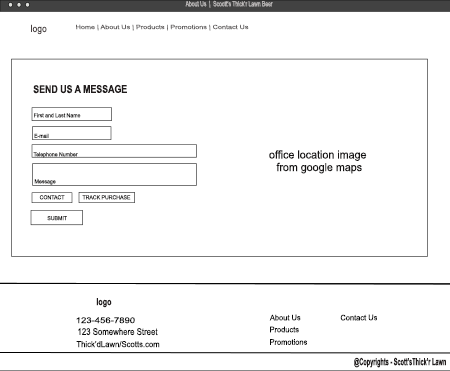
<style>
.page{position:relative;width:450px;height:371px;background:#ffffff}
.page>*{position:absolute;margin:0}
.t1{font:7.4px "ArialNarrow";color:#c2bfbf;scale:0.83 1}
.t2{font:9.8px "ArialNarrow";color:#484040;scale:1.07 1}
.t3{font:5.8px "ArialNarrow";color:#615e5e;scale:1.52 1}
.t4{font:10.8px "ArialNarrow-Bold";color:#211c1c}
.t5{font:5.6px "ArialNarrow";color:#151313;scale:1.13 1}
.t6{font:11.2px/12.5px "ArialNarrow";color:#151313;scale:1.16 1}
.t7{font:5.6px "ArialNarrow";scale:1.13 1}
.t8{font:5.6px "ArialNarrow";color:#313030;scale:1.13 1}
.t9{font:9.7px "ArialNarrow-Bold";color:#211c1c;scale:0.91 1}
.t10{font:8.1px "ArialNarrow";color:#080808;scale:1.44 1}
.t11{font:7.7px "ArialNarrow";color:#080808;scale:1.18 1}
.t12{font:9.3px "ArialNarrow";color:#080808}
.t13{font:8.3px "ArialNarrow";color:#080808;scale:1.14 1}
.t14{font:10px "ArialNarrow-Bold";color:#211c1c;scale:0.68 1}
</style>
<div class="page">
<p class="t1" style="left:185px;top:0px;width:88px;height:8px">About Us  |  Scoott’s Thick’r Lawn Beer</p>
<p class="t2" style="left:31px;top:24px;width:16px;height:11px">logo</p>
<p class="t3" style="left:76px;top:24px;width:173px;height:7px">Home | About Us | Products | Promotions | Contact Us</p>
<p class="t4" style="left:33px;top:84px;width:94px;height:10px">SEND US A MESSAGE</p>
<p class="t5" style="left:34px;top:113px;width:47px;height:5px">First and Last Name</p>
<p class="t5" style="left:34px;top:133px;width:15px;height:5px">E-mail</p>
<p class="t6" style="left:269px;top:150px;width:98px;height:24px;text-align:center">office location image <br>from google maps</p>
<p class="t7" style="left:33px;top:152px;width:45px;height:6px">Telephone Number</p>
<p class="t5" style="left:34px;top:179px;width:22px;height:6px">Message</p>
<p class="t5" style="left:39px;top:195px;width:26px;height:5px">CONTACT</p>
<p class="t8" style="left:82px;top:195px;width:49px;height:5px">TRACK PURCHASE</p>
<p class="t5" style="left:47px;top:216px;width:20px;height:5px">SUBMIT</p>
<p class="t9" style="left:96px;top:298px;width:16px;height:10px">logo</p>
<p class="t10" style="left:76px;top:317px;width:59px;height:7px">123-456-7890</p>
<p class="t11" style="left:269px;top:314px;width:32px;height:7px">About Us</p>
<p class="t11" style="left:340px;top:314px;width:37px;height:7px">Contact Us</p>
<p class="t12" style="left:78px;top:328px;width:80px;height:8px">123 Somewhere Street</p>
<p class="t11" style="left:270px;top:326px;width:29px;height:7px">Products</p>
<p class="t13" style="left:76px;top:341px;width:84px;height:7px">Thick’dLawn/Scotts.com</p>
<p class="t11" style="left:270px;top:339px;width:37px;height:6px">Promotions</p>
<p class="t14" style="left:354px;top:357px;width:92px;height:11px">@Copyrights - Scott’sThick’r Lawn</p>
</div>
